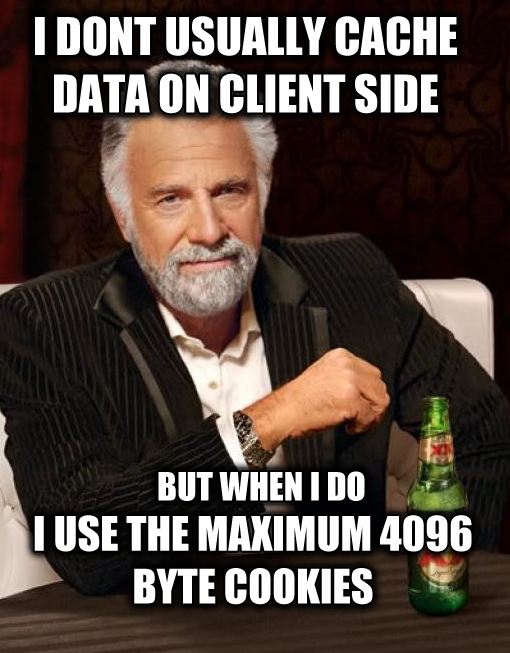
<style>
.page{position:relative;width:510px;height:653px}
.page>*{position:absolute;margin:0}
.t1{font:48px "Impact";color:#ffffff}
.t2{font:36px "Impact";color:#ffffff}
.t3{font:44px "Impact";color:#ffffff}
</style>
<div class="page">
<p class="t1" style="left:35px;top:16px;width:422px;height:98px;text-align:center">I DONT USUALLY CACHE DATA ON CLIENT SIDE</p>
<p class="t2" style="left:158px;top:471px;width:207px;height:30px">BUT WHEN I DO</p>
<p class="t3" style="left:34px;top:515px;width:438px;height:90px;text-align:center">I USE THE MAXIMUM 4096 BYTE COOKIES</p>
</div>
